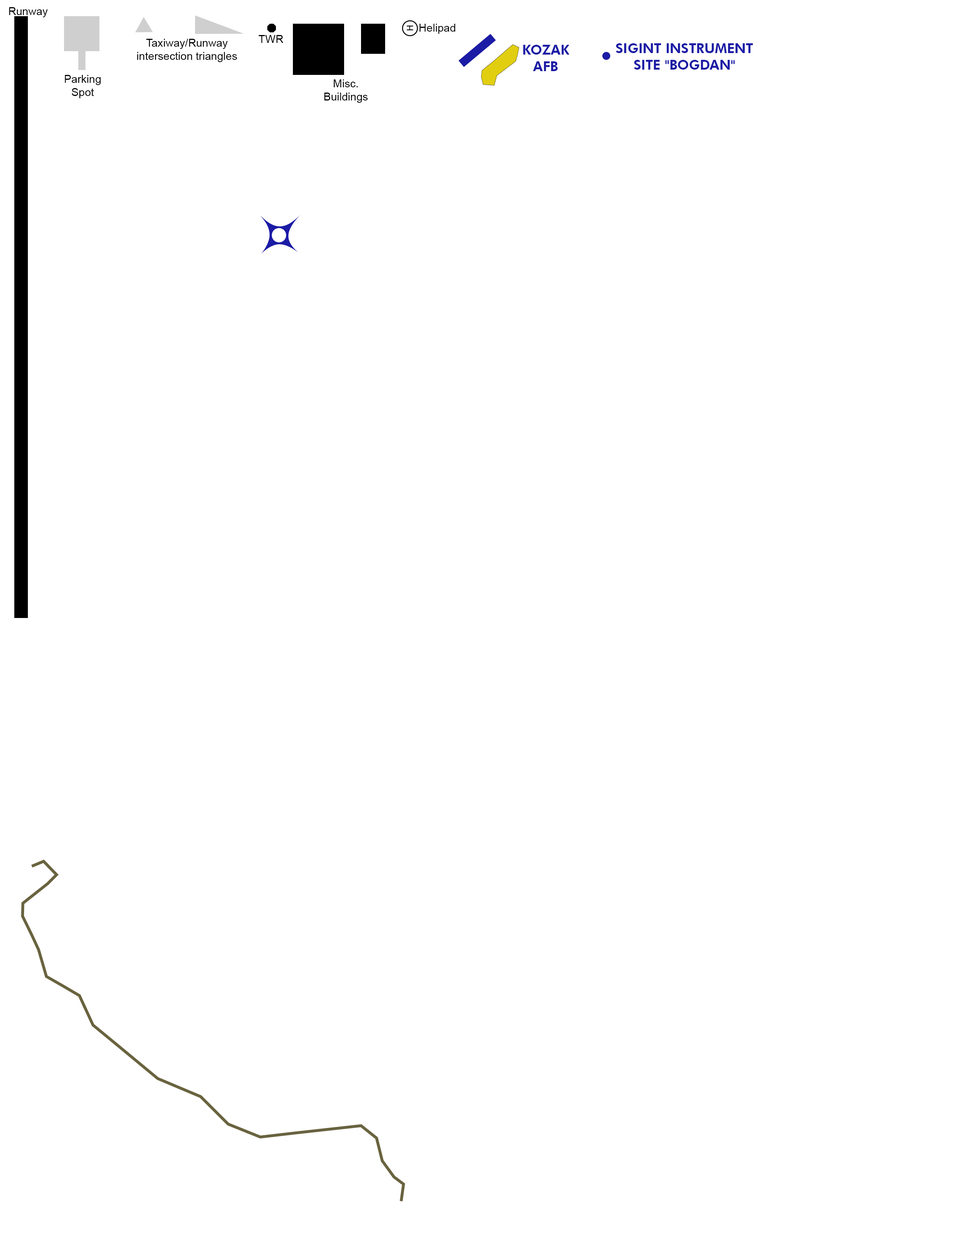
<style>
.page{position:relative;width:960px;height:1242px;background:#ffffff}
.page>*{position:absolute;margin:0}
.t1{font:11px "ArialMT";color:#010101}
.t2{font:13.6px "FuturaBT-Heavy";color:#1b1ba5}
</style>
<div class="page">
<p class="t1" style="left:9px;top:7px;width:39px;height:10px">Runway</p>
<p class="t1" style="left:419px;top:24px;width:36px;height:10px">Helipad</p>
<p class="t1" style="left:137px;top:39px;width:100px;height:23px;text-align:center">Taxiway/Runway intersection triangles</p>
<p class="t1" style="left:259px;top:35px;width:24px;height:8px">TWR</p>
<p class="t2" style="left:523px;top:45px;width:47px;height:26px;text-align:center">KOZAK<br>AFB</p>
<p class="t2" style="left:616px;top:43px;width:137px;height:27px;text-align:center">SIGINT INSTRUMENT SITE "BOGDAN"</p>
<p class="t1" style="left:65px;top:75px;width:36px;height:23px;text-align:center">Parking Spot</p>
<p class="t1" style="left:324px;top:79px;width:44px;height:24px;text-align:center">Misc. Buildings</p>
</div>
